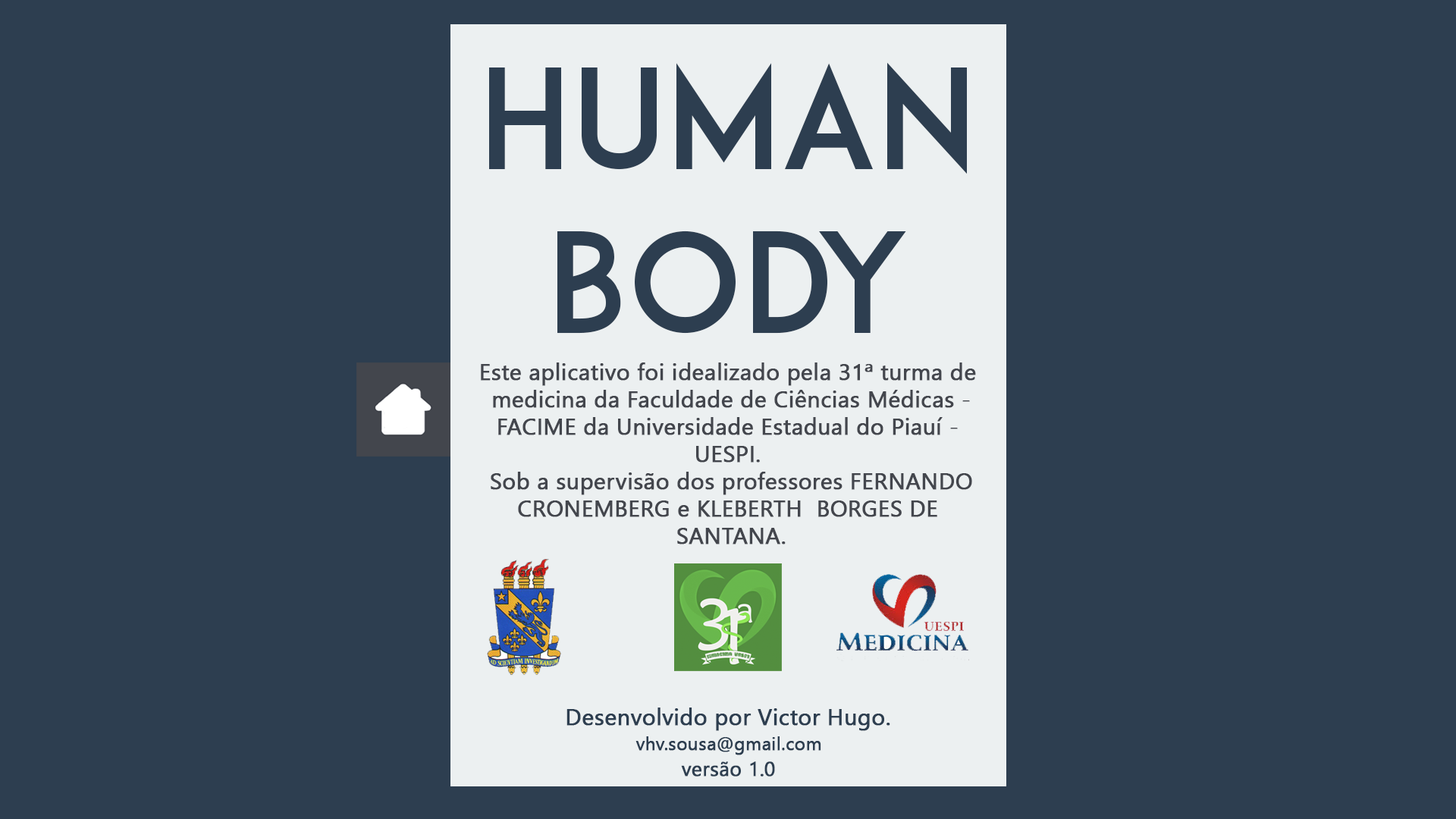
<style>
.page{position:relative;width:1456px;height:819px;background:#2d3e50}
.page>*{position:absolute;margin:0}
.t1{font:136.5px "ADAM.CGPRO";color:#2d3e50}
.t2{font:22.7px "SegoeUI";color:#43464d;font-weight:bold}
.t3{font:22.7px "SegoeUI";color:#2d3e50;font-weight:bold}
.t4{font:18.2px "SegoeUI";color:#2d3e50;font-weight:bold}
.t5{font:19.8px "SegoeUI";color:#2d3e50;font-weight:bold}
</style>
<div class="page">
<p class="t1" style="left:489px;top:62px;width:478px;height:272px;text-align:center">HuMAN<br>BODY</p>
<p class="t1" style="left:489px;top:62px;width:478px;height:272px;text-align:center">HuMAN<br>BODY</p>
<p class="t2" style="left:481px;top:362px;width:495px;height:182px;text-align:center">Este aplicativo foi idealizado pela 31ª turma de <br>medicina da Faculdade de Ciências Médicas -<br>FACIME da Universidade Estadual do Piauí - <br>UESPI. <br>Sob a supervisão dos professores FERNANDO<br>CRONEMBERG e KLEBERTH  BORGES DE <br>SANTANA.</p>
<p class="t3" style="left:566px;top:708px;width:324px;height:23px">Desenvolvido por Victor Hugo.</p>
<p class="t4" style="left:635px;top:736px;width:186px;height:19px">vhv.sousa@gmail.com</p>
<p class="t5" style="left:681px;top:761px;width:94px;height:16px">versão 1.0</p>
</div>
